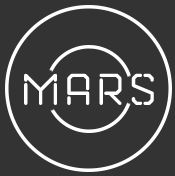
<style>
.page{position:relative;width:175px;height:176px;background:#333333}
.page>*{position:absolute;margin:0}
.t1{font:50.4px "Marske";letter-spacing:0.14em;color:#ffffff}
</style>
<div class="page">
<p class="t1" style="left:24px;top:73px;width:130px;height:32px">MARS</p>
</div>
